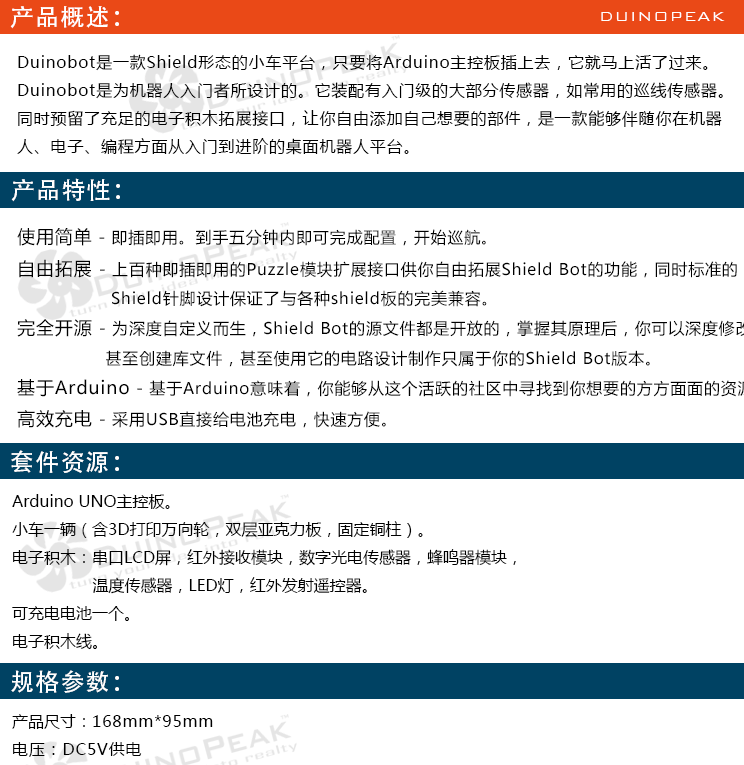
<style>
.page{position:relative;width:744px;height:765px;background:#ffffff}
.page>*{position:absolute;margin:0}
.t1{font:24px "AdobeHeitiStd-Regular";letter-spacing:0.05em;color:#ffffff}
.t2{font:18px "BankGothicBT-Light";letter-spacing:0.05em;color:#ffffff}
.t3{font:16px "MicrosoftYaHei";letter-spacing:0.05em;color:#000000}
.t4{font:16px "MicrosoftYaHei";color:#000000}
</style>
<div class="page">
<p class="t1" style="left:10px;top:6px;width:109px;height:23px">产品概述：</p>
<p class="t2" style="left:601px;top:12px;width:124px;height:9px">DUINOPEAK</p>
<p class="t3" style="left:17px;top:54px;width:706px;height:101px">Duinobot是一款Shield形态的小车平台，只要将Arduino主控板插上去，它就马上活了过来。<br>Duinobot是为机器人入门者所设计的。它装配有入门级的大部分传感器，如常用的巡线传感器。<br>同时预留了充足的电子积木拓展接口，让你自由添加自己想要的部件，是一款能够伴随你在机器<br>人、电子、编程方面从入门到进阶的桌面机器人平台。</p>
<p class="t1" style="left:11px;top:178px;width:109px;height:24px">产品特性：</p>
<p class="t1" style="left:11px;top:450px;width:108px;height:23px">套件资源：</p>
<p class="t4" style="left:12px;top:494px;width:504px;height:156px">Arduino UNO主控板。<br>小车一辆（含3D打印万向轮，双层亚克力板，固定铜柱）。<br>电子积木：串口LCD屏，红外接收模块，数字光电传感器，蜂鸣器模块，<br>                 温度传感器，LED灯，红外发射遥控器。<br>可充电电池一个。<br>电子积木线。</p>
<p class="t1" style="left:11px;top:670px;width:108px;height:23px">规格参数：</p>
<p class="t3" style="left:12px;top:714px;width:201px;height:43px"><span class="t4">产品尺寸：</span>168mm*95mm<br>电压：DC5V供电</p>
</div>
